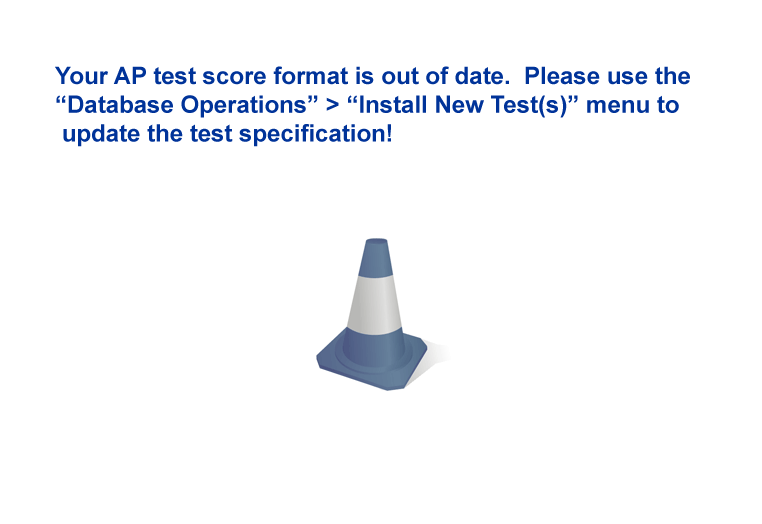
<style>
.page{position:relative;width:762px;height:524px;background:#ffffff}
.page>*{position:absolute;margin:0}
.t1{font:24px "Arial-BoldMT";color:#003399}
</style>
<div class="page">
<p class="t1" style="left:55px;top:66px;width:635px;height:81px">Your AP test score format is out of date.  Please use the <br>“Database Operations” &gt; “Install New Test(s)” menu to<br> update the test specification!</p>
</div>
